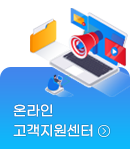
<style>
.page{position:relative;width:130px;height:149px;background:#ffffff}
.page>*{position:absolute;margin:0}
.t1{font:14px/20px "GmarketSansTTFMedium";color:#fefefe}
</style>
<div class="page">
<p class="t1" style="left:13px;top:104px;width:80px;height:33px">온라인 <br>고객지원센터</p>
</div>
